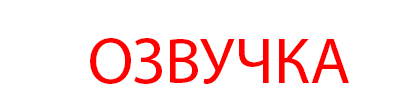
<style>
.page{position:relative;width:420px;height:110px;background:#ffffff}
.page>*{position:absolute;margin:0}
.t1{font:66px "MyriadPro-Regular";color:#ff0000}
</style>
<div class="page">
<p class="t1" style="left:90px;top:38px;width:259px;height:46px">ОЗВУЧКА</p>
</div>
